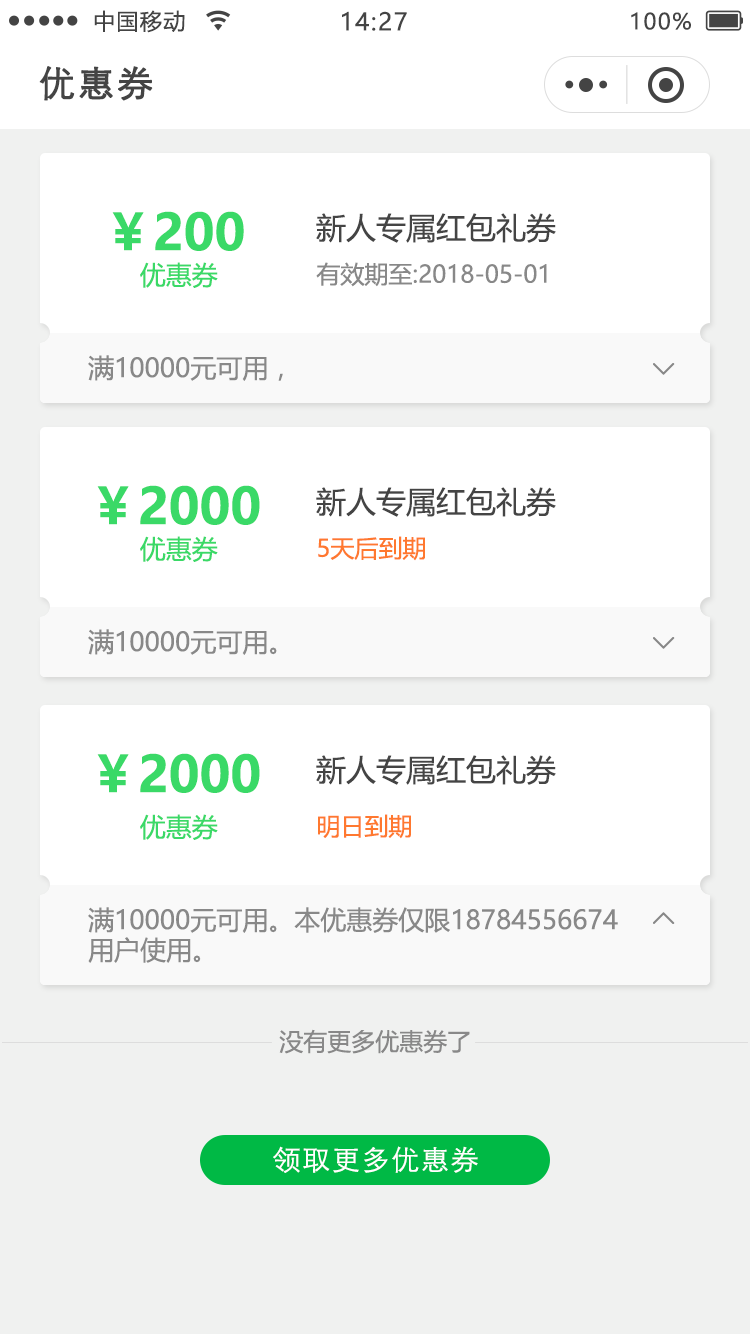
<style>
.page{position:relative;width:750px;height:1334px;background:#ffffff}
.page>*{position:absolute;margin:0}
.t1{font:22px "MicrosoftYaHei";letter-spacing:0.06em;color:#444444}
.t2{font:24px "MicrosoftYaHei";letter-spacing:0.06em;color:#444444}
.t3{font:36px "STXihei";letter-spacing:0.06em;color:#444444;font-weight:bold}
.t4{font:50px "MicrosoftYaHei-Bold";color:#3ad967}
.t5{font:30px "MicrosoftYaHei";color:#444444}
.t6{font:26px "MicrosoftYaHei";color:#3ad967}
.t7{font:24px "MicrosoftYaHei";color:#888888}
.t8{font:26px "MicrosoftYaHei";color:#888888}
.t9{font:29.6px "NSimSun";letter-spacing:0.06em;color:#888888;font-weight:bold}
.t10{font:24px "MicrosoftYaHei";color:#ff782f}
.t11{font:26px/30px "MicrosoftYaHei";color:#888888}
.t12{font:28px "STXihei";letter-spacing:0.06em;color:#ffffff}
</style>
<div class="page">
<p class="t1" style="left:94px;top:10px;width:91px;height:23px">中国移动</p>
<p class="t2" style="left:342px;top:11px;width:65px;height:20px">14:27</p>
<p class="t1" style="left:631px;top:12px;width:60px;height:18px">100%</p>
<p class="t3" style="left:39px;top:66px;width:114px;height:35px">优惠券</p>
<p class="t4" style="left:112px;top:211px;width:132px;height:40px">￥200</p>
<p class="t5" style="left:316px;top:213px;width:240px;height:30px">新人专属红包礼券</p>
<p class="t6" style="left:140px;top:262px;width:78px;height:26px">优惠券</p>
<p class="t7" style="left:316px;top:262px;width:231px;height:25px">有效期至:2018-05-01</p>
<p class="t8" style="left:88px;top:355px;width:195px;height:26px">满10000元可用，</p>
<p class="t9" style="left:653px;top:363px;width:22px;height:12px;rotate:-90deg">&lt;</p>
<p class="t4" style="left:97px;top:485px;width:163px;height:40px">￥2000</p>
<p class="t5" style="left:316px;top:487px;width:240px;height:30px">新人专属红包礼券</p>
<p class="t6" style="left:140px;top:536px;width:78px;height:26px">优惠券</p>
<p class="t10" style="left:318px;top:536px;width:107px;height:25px">5天后到期</p>
<p class="t8" style="left:88px;top:629px;width:189px;height:26px">满10000元可用。</p>
<p class="t9" style="left:653px;top:637px;width:22px;height:12px;rotate:-90deg">&lt;</p>
<p class="t4" style="left:97px;top:753px;width:163px;height:40px">￥2000</p>
<p class="t5" style="left:316px;top:755px;width:240px;height:30px">新人专属红包礼券</p>
<p class="t6" style="left:140px;top:814px;width:78px;height:26px">优惠券</p>
<p class="t10" style="left:318px;top:814px;width:93px;height:25px">明日到期</p>
<p class="t11" style="left:88px;top:907px;width:530px;height:56px">满10000元可用。本优惠券仅限18784556674<br>用户使用。</p>
<p class="t9" style="left:653px;top:912px;width:22px;height:12px;rotate:90deg">&lt;</p>
<p class="t7" style="left:279px;top:1029px;width:191px;height:25px">没有更多优惠券了</p>
<p class="t12" style="left:273px;top:1146px;width:205px;height:27px">领取更多优惠券</p>
</div>
